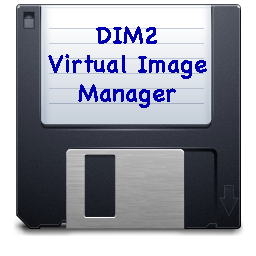
<style>
.page{position:relative;width:256px;height:256px;background:#ffffff}
.page>*{position:absolute;margin:0}
.t1{font:24px "Chalkboard-Bold";color:#0000b0}
</style>
<div class="page">
<p class="t1" style="left:48px;top:26px;width:159px;height:82px;text-align:center">DIM2<br>Virtual Image<br>Manager</p>
</div>
